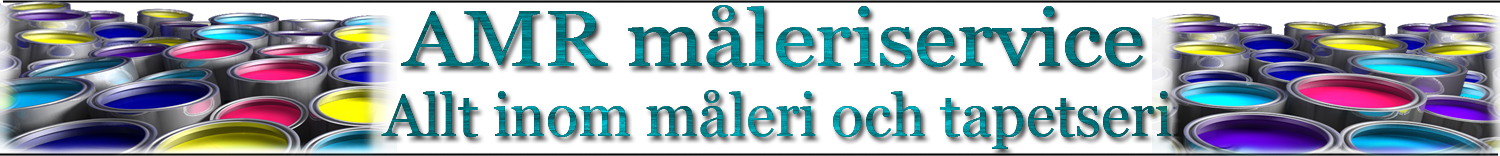
<style>
.page{position:relative;width:1500px;height:156px;background:#ffffff}
.page>*{position:absolute;margin:0}
.t1{font:80px "Georgia";scale:1.1 1}
.t2{font:60px "Georgia"}
</style>
<div class="page">
<p class="t1" style="left:401px;top:5px;width:742px;height:62px">AMR måleriservice</p>
<p class="t2" style="left:381px;top:90px;width:857px;height:59px">Allt inom måleri och tapetsering</p>
</div>
